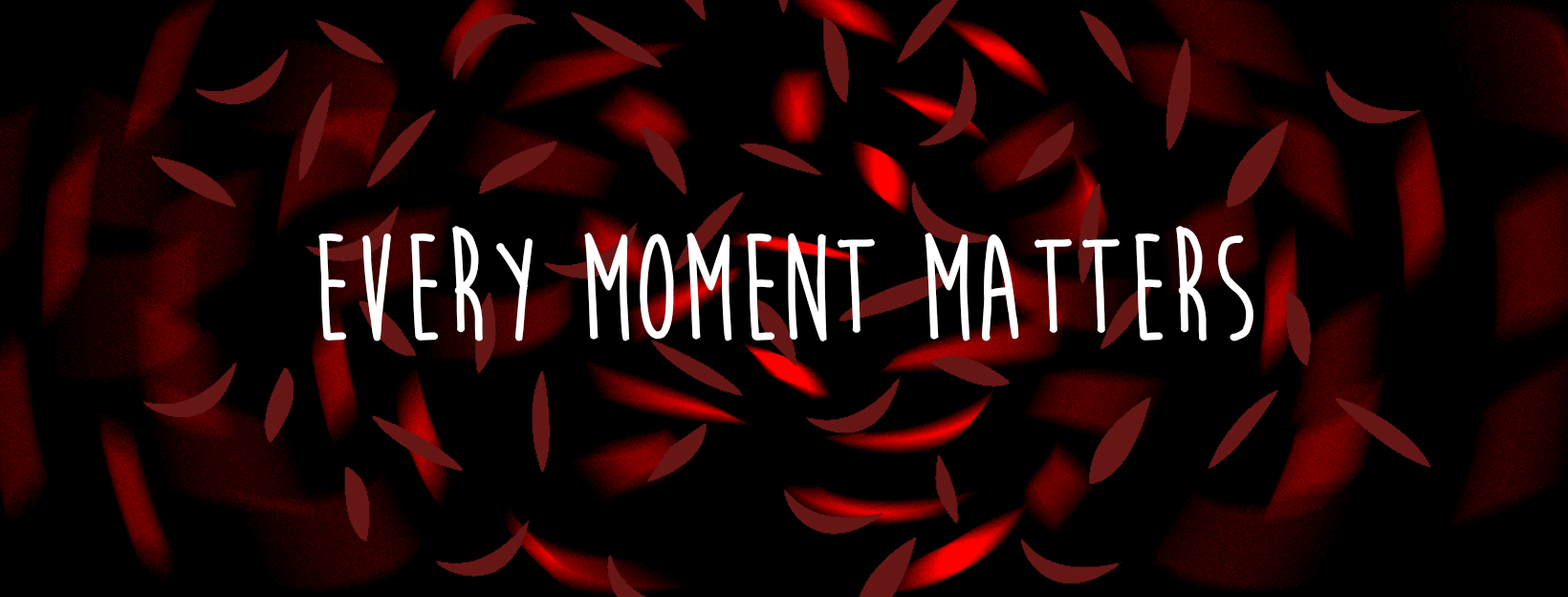
<style>
.page{position:relative;width:1568px;height:597px;background:#000000}
.page>*{position:absolute;margin:0}
.t1{font:153px "MoonFlower";letter-spacing:-0.02em;color:#ffffff;font-weight:bold}
</style>
<div class="page">
<p class="t1" style="left:318px;top:226px;width:935px;height:115px">EVERY MOMENT MATTERs</p>
</div>
